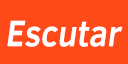
<style>
.page{position:relative;width:128px;height:64px;background:#fe4a18}
.page>*{position:absolute;margin:0}
.t1{font:37.8px "FogSansIt";color:#ffffff;scale:0.87 1}
</style>
<div class="page">
<p class="t1" style="left:7px;top:20px;width:116px;height:27px">Escutar</p>
</div>
